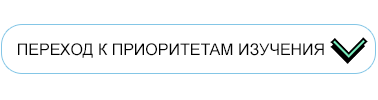
<style>
.page{position:relative;width:378px;height:100px;background:#ffffff}
.page>*{position:absolute;margin:0}
.t1{font:16px "ArialMT";color:#010101;text-transform:uppercase}
</style>
<div class="page">
<p class="t1" style="left:18px;top:43px;width:306px;height:15px">переход к приоритетам изучения</p>
</div>
